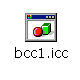
<style>
.page{position:relative;width:80px;height:80px;background:#ffffff}
.page>*{position:absolute;margin:0}
.t1{font:14px "MSReferenceSansSerif";color:#000000}
</style>
<div class="page">
<p class="t1" style="left:15px;top:47px;width:53px;height:11px">bcc1.icc</p>
</div>
